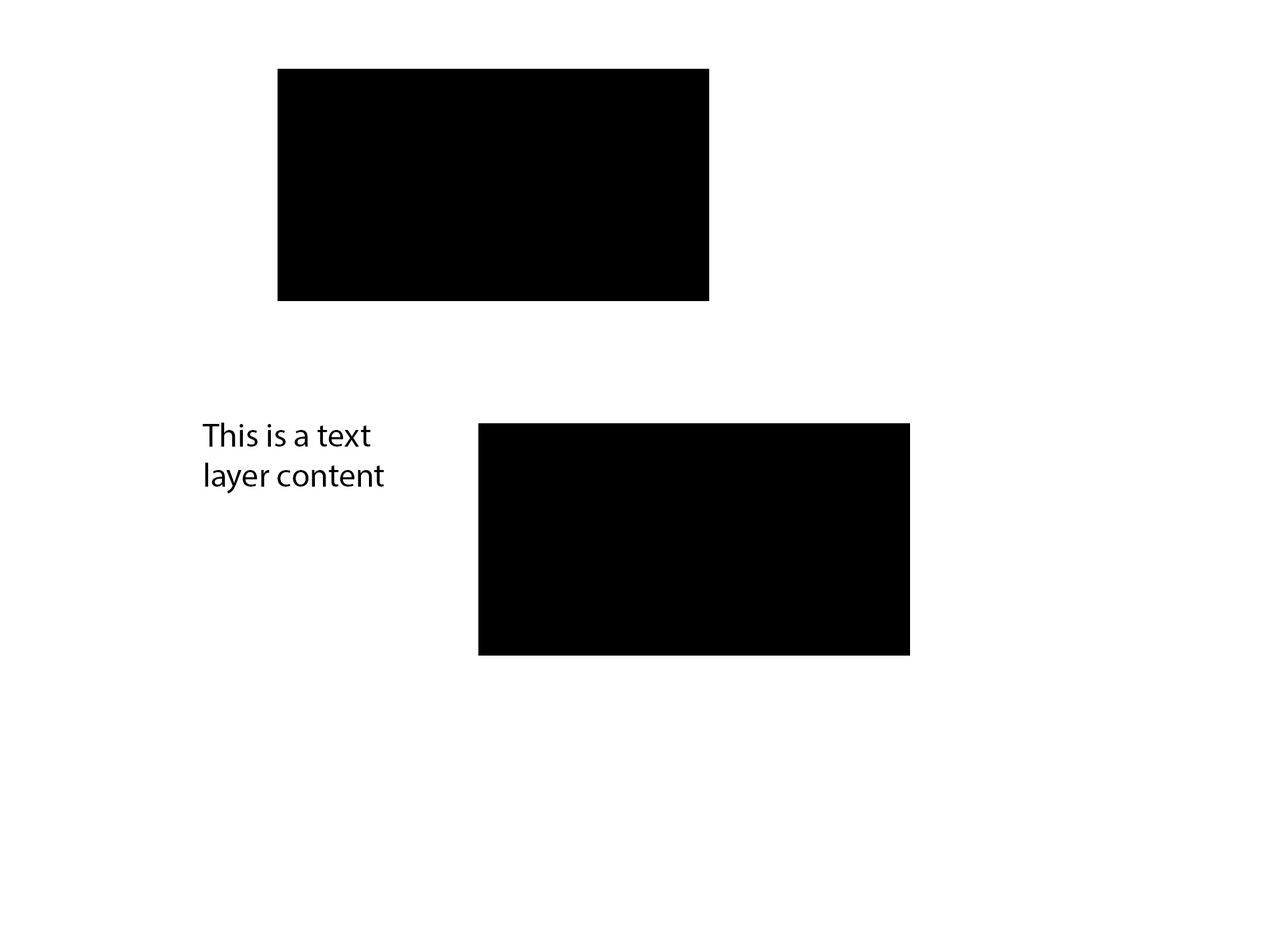
<style>
.page{position:relative;width:1261px;height:946px;background:#ffffff}
.page>*{position:absolute;margin:0}
.t1{font:33.4px "MyriadPro-Regular";color:#000000}
</style>
<div class="page">
<p class="t1" style="left:202px;top:422px;width:182px;height:72px">This is a text layer content</p>
</div>
